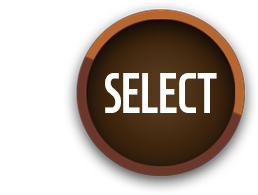
<style>
.page{position:relative;width:258px;height:195px;background:#ffffff}
.page>*{position:absolute;margin:0}
.t1{font:54px "HomenajeMod-Bold";color:#ffffff;scale:0.87 1}
</style>
<div class="page">
<p class="t1" style="left:105px;top:73px;width:112px;height:40px">SELECT</p>
</div>
